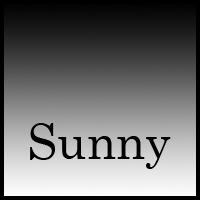
<style>
.page{position:relative;width:200px;height:200px}
.page>*{position:absolute;margin:0}
.t1{font:48px "CenturySchoolbook";color:#000000}
</style>
<div class="page">
<p class="t1" style="left:30px;top:123px;width:141px;height:46px">Sunny</p>
</div>
